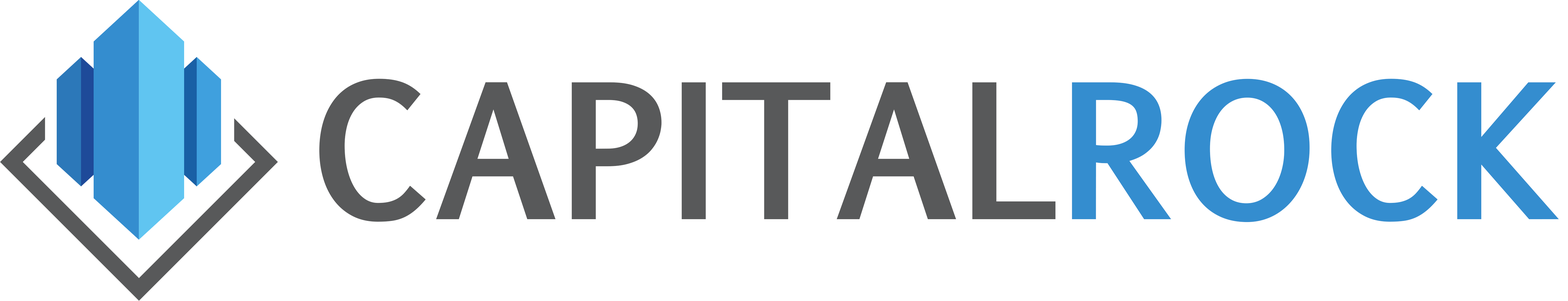
<style>
.page{position:relative;width:1568px;height:301px;background:#ffffff}
.page>*{position:absolute;margin:0}
.t1{font:179px "EuphemiaUCAS-Bold";color:#58595a}
.t2{font:179px "EuphemiaUCAS-Bold";color:#348dcf}
</style>
<div class="page">
<p class="t1" style="left:319px;top:79px;width:1240px;height:143px">CAPITAL<span class="t2">ROCK</span></p>
</div>
